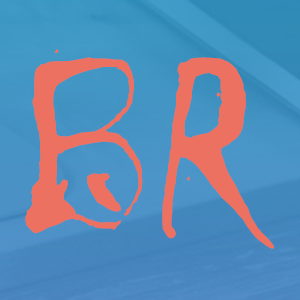
<style>
.page{position:relative;width:300px;height:300px}
.page>*{position:absolute;margin:0}
.t1{font:259.8px "Chiller-Regular";color:#ed7161}
</style>
<div class="page">
<p class="t1" style="left:25px;top:49px;width:250px;height:200px">BR</p>
</div>
